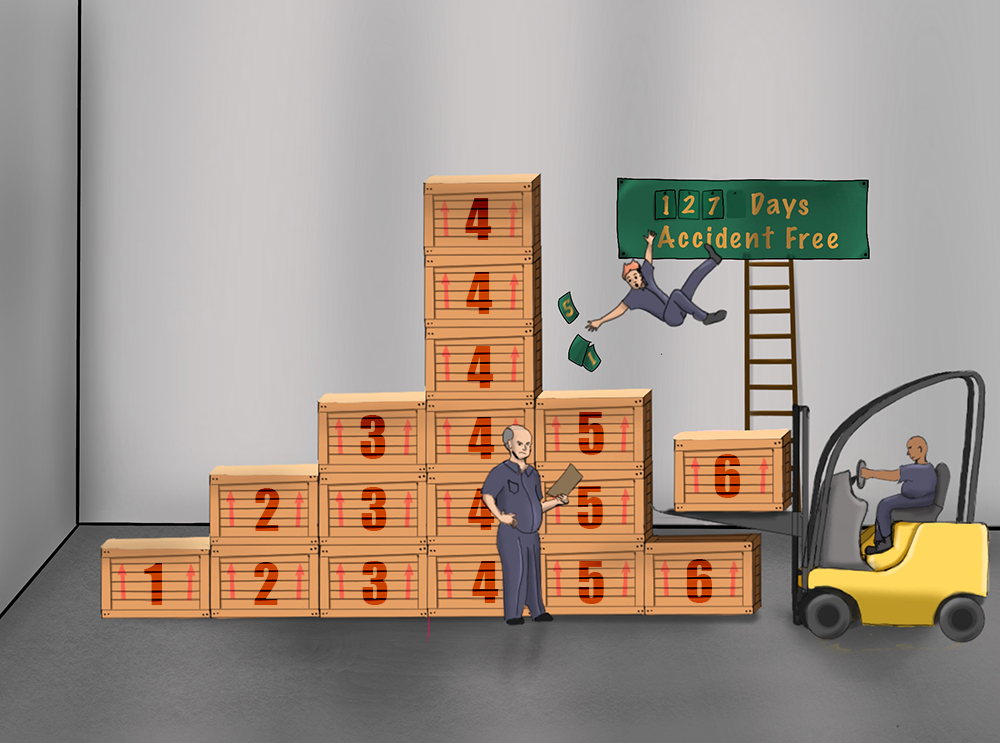
<style>
.page{position:relative;width:1000px;height:743px}
.page>*{position:absolute;margin:0}
.t1{font:52.9px "Impact";letter-spacing:-0.01em;text-transform:uppercase}
.t2{font:52.9px "Impact";letter-spacing:-0.01em;color:#c93f00;text-transform:uppercase}
</style>
<div class="page">
<p class="t1" style="left:465px;top:198px;width:27px;height:42px">4</p>
<p class="t1" style="left:466px;top:272px;width:27px;height:42px">4</p>
<p class="t2" style="left:467px;top:346px;width:27px;height:42px">4</p>
<p class="t1" style="left:578px;top:412px;width:26px;height:43px">5</p>
<p class="t1" style="left:360px;top:415px;width:26px;height:44px">3</p>
<p class="t1" style="left:468px;top:417px;width:27px;height:42px">4</p>
<p class="t1" style="left:714px;top:454px;width:26px;height:44px">6</p>
<p class="t1" style="left:577px;top:486px;width:26px;height:43px">5</p>
<p class="t1" style="left:255px;top:488px;width:25px;height:43px">2</p>
<p class="t1" style="left:361px;top:487px;width:26px;height:44px">3</p>
<p class="t1" style="left:144px;top:563px;width:18px;height:42px">1</p>
<p class="t2" style="left:254px;top:562px;width:25px;height:43px">2</p>
<p class="t1" style="left:362px;top:561px;width:26px;height:44px">3</p>
<p class="t1" style="left:472px;top:561px;width:27px;height:42px">4</p>
<p class="t1" style="left:578px;top:561px;width:26px;height:43px">5</p>
<p class="t1" style="left:686px;top:559px;width:26px;height:44px">6</p>
</div>
